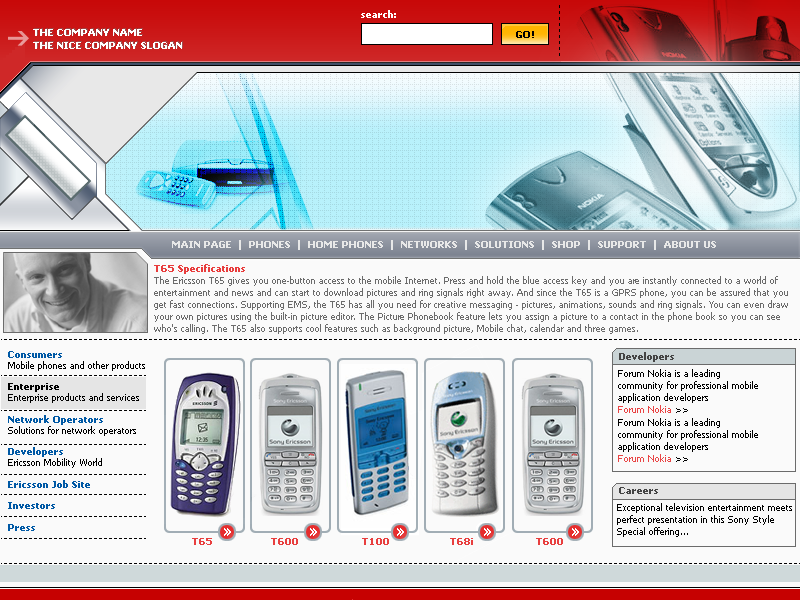
<style>
.page{position:relative;width:800px;height:600px;background:#fafafa}
.page>*{position:absolute;margin:0}
.t1{font:9px "Tahoma-Bold";color:#ffffff}
.t2{font:9px "Verdana-Bold";color:#000000;text-transform:uppercase}
.t3{font:9px "Tahoma-Bold";color:#f9f9f9;text-transform:uppercase}
.t4{font:9px/12px "Tahoma";color:#6b6b6b}
.t5{font:9px/12px "Tahoma-Bold";color:#e83c3c}
.t6{font:9px "Tahoma-Bold";color:#0059a5}
.t7{font:9px "Tahoma";color:#000000}
.t8{font:9px "Tahoma-Bold";color:#000000}
.t9{font:9px "Tahoma-Bold";color:#444444}
.t10{font:9px/12px "Tahoma";color:#000000}
.t11{font:9px/12px "Tahoma";color:#e94343}
.t12{font:9px/12px "Tahoma";color:#e94545}
.t13{font:10px "Tahoma-Bold";color:#e83f3f}
</style>
<div class="page">
<p class="t1" style="left:361px;top:10px;width:35px;height:8px">search:</p>
<p class="t1" style="left:33px;top:29px;width:109px;height:7px">THE COMPANY NAME</p>
<p class="t2" style="left:516px;top:31px;width:18px;height:7px">go!</p>
<p class="t1" style="left:33px;top:42px;width:149px;height:7px">THE NICE COMPANY SLOGAN</p>
<p class="t3" style="left:172px;top:240px;width:544px;height:10px">Main Page  |  Phones  |  home phones  |  networks  |  solutions  |  shop  |  SUPPORT  |  ABOUT US</p>
<p class="t4" style="left:154px;top:264px;width:634px;height:70px"><span class="t5">T65 Specifications<br></span>The Ericsson T65 gives you one-button access to the mobile Internet. Press and hold the blue access key and you are instantly connected to a world of <br>entertainment and news and can start to download pictures and ring signals right away. And since the T65 is a GPRS phone, you can be assured that you <br>get fast connections. Supporting EMS, the T65 has all you need for creative messaging - pictures, animations, sounds and ring signals. You can even draw <br>your own pictures using the built-in picture editor. The Picture Phonebook feature lets you assign a picture to a contact in the phone book so you can see <br>who's calling. The T65 also supports cool features such as background picture, Mobile chat, calendar and three games.</p>
<p class="t6" style="left:8px;top:351px;width:137px;height:180px">Consumers<br><span class="t7">Mobile phones and other products<br><br></span><span class="t8">Enterprise<br></span><span class="t7">Enterprise products and services<br><br></span>Network Operators<br><span class="t7">Solutions for network operators<br><br></span>Developers<br><span class="t7">Ericsson Mobility World<br><br></span>Ericsson Job Site<br><br>Investors<br><br>Press</p>
<p class="t9" style="left:619px;top:352px;width:55px;height:10px">Developers</p>
<p class="t10" style="left:618px;top:369px;width:140px;height:44px">Forum Nokia is a leading<br>community for professional mobile<br>application developers<br><span class="t11">Forum Nokia</span> &gt;&gt;</p>
<p class="t10" style="left:618px;top:418px;width:140px;height:44px">Forum Nokia is a leading<br>community for professional mobile<br>application developers<br><span class="t12">Forum Nokia</span> &gt;&gt;</p>
<p class="t9" style="left:619px;top:487px;width:39px;height:7px">Careers</p>
<p class="t10" style="left:617px;top:503px;width:175px;height:34px">Exceptional television entertainment meets<br>perfect presentation in this Sony Style<br>Special offering...</p>
<p class="t13" style="left:192px;top:538px;width:20px;height:7px">T65</p>
<p class="t13" style="left:271px;top:538px;width:27px;height:7px">T600</p>
<p class="t13" style="left:362px;top:538px;width:27px;height:7px">T100</p>
<p class="t13" style="left:450px;top:538px;width:23px;height:7px">T68i</p>
<p class="t13" style="left:536px;top:538px;width:27px;height:7px">T600</p>
</div>
